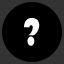
<style>
.page{position:relative;width:64px;height:64px;background:#000000}
.page>*{position:absolute;margin:0}
.t1{font:35.1px "Meloriac";letter-spacing:0.05em;color:#ffffff;scale:0.74 1}
</style>
<div class="page">
<p class="t1" style="left:24px;top:18px;width:16px;height:28px">?</p>
</div>
